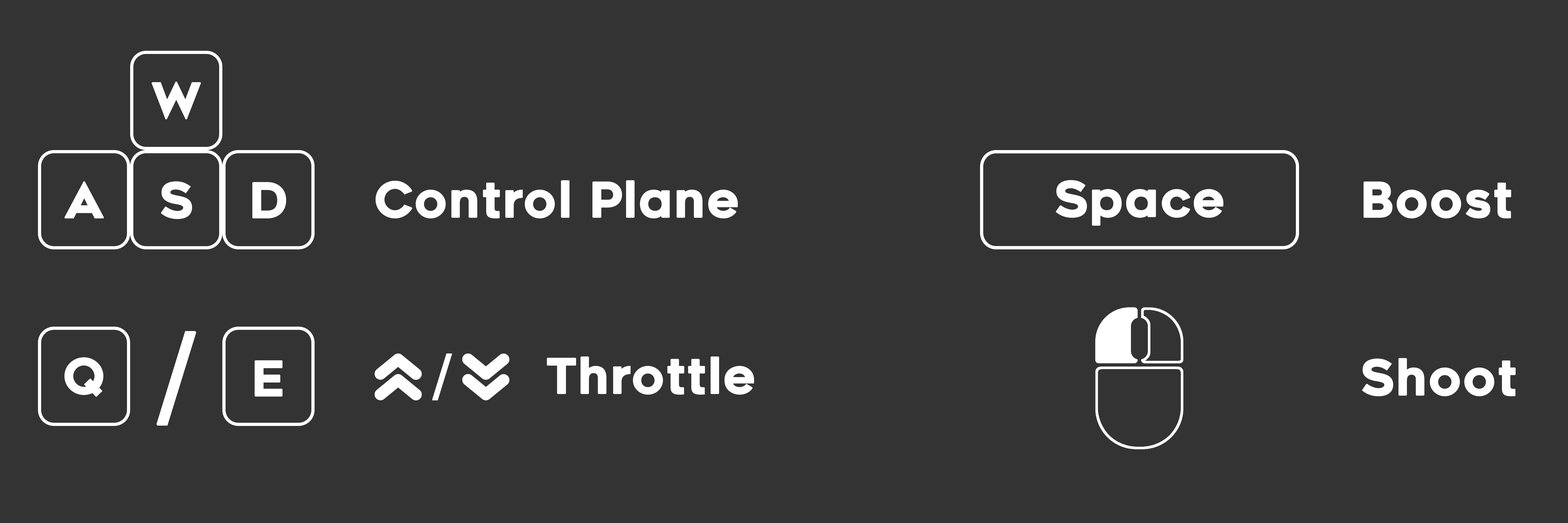
<style>
.page{position:relative;width:1568px;height:523px;background:#333333}
.page>*{position:absolute;margin:0}
.t1{font:47.9px "Renogare-Regular";color:#ffffff;font-weight:bold}
.t2{font:95.7px "Renogare-Regular";color:#ffffff;font-weight:bold;scale:0.65 1}
.t3{font:47.9px "Renogare-Regular";color:#ffffff;font-weight:bold;scale:0.65 1}
</style>
<div class="page">
<p class="t1" style="left:152px;top:81px;width:49px;height:38px">W</p>
<p class="t1" style="left:64px;top:181px;width:40px;height:38px">A</p>
<p class="t1" style="left:161px;top:181px;width:31px;height:38px">S</p>
<p class="t1" style="left:252px;top:182px;width:34px;height:36px">D</p>
<p class="t1" style="left:375px;top:180px;width:363px;height:39px">Control Plane</p>
<p class="t1" style="left:1056px;top:180px;width:167px;height:46px">Space</p>
<p class="t1" style="left:1364px;top:181px;width:147px;height:38px">Boost</p>
<p class="t2" style="left:156px;top:331px;width:41px;height:94px">/</p>
<p class="t1" style="left:432px;top:353px;width:322px;height:47px"><span class="t3">/</span>      Throttle</p>
<p class="t1" style="left:64px;top:357px;width:40px;height:40px">Q</p>
<p class="t1" style="left:255px;top:360px;width:28px;height:36px">E</p>
<p class="t1" style="left:1362px;top:358px;width:154px;height:38px">Shoot</p>
</div>
